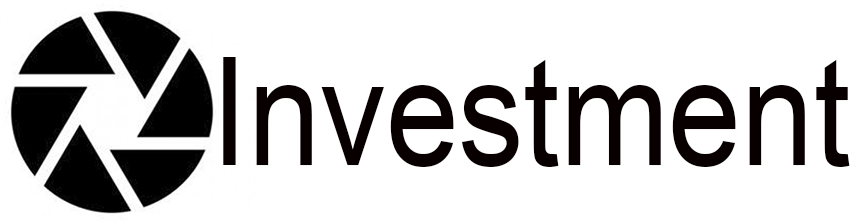
<style>
.page{position:relative;width:858px;height:222px;background:#ffffff}
.page>*{position:absolute;margin:0}
.t1{font:150.4px "ArialMT";color:#080000;scale:0.87 1}
</style>
<div class="page">
<p class="t1" style="left:223px;top:57px;width:627px;height:110px">Investment</p>
</div>
